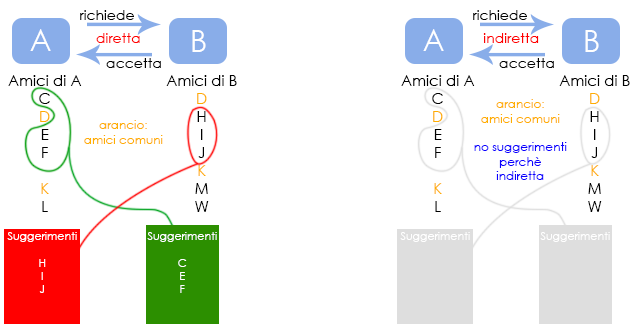
<style>
.page{position:relative;width:642px;height:329px;background:#ffffff}
.page>*{position:absolute;margin:0}
.t1{font:14px "CenturyGothic";color:#000000}
.t2{font:30px "CenturyGothic";color:#ffffff}
.t3{font:14px "CenturyGothic";color:#ff0000}
.t4{font:15px "CenturyGothic";color:#000000}
.t5{font:15px "CenturyGothic";color:#ffae00}
.t6{font:12px "CenturyGothic";color:#0c00ff}
.t7{font:12px "CenturyGothic";color:#ffae00}
.t8{font:11px "CenturyGothic";color:#ffffff}
</style>
<div class="page">
<p class="t1" style="left:80px;top:10px;width:54px;height:10px">richiede</p>
<p class="t1" style="left:473px;top:10px;width:54px;height:10px">richiede</p>
<p class="t2" style="left:30px;top:29px;width:21px;height:22px">A</p>
<p class="t2" style="left:192px;top:30px;width:14px;height:22px">B</p>
<p class="t2" style="left:423px;top:29px;width:21px;height:22px">A</p>
<p class="t2" style="left:585px;top:30px;width:14px;height:22px">B</p>
<p class="t3" style="left:96px;top:33px;width:44px;height:10px">diretta</p>
<p class="t3" style="left:483px;top:33px;width:56px;height:10px">indiretta</p>
<p class="t1" style="left:106px;top:58px;width:55px;height:10px">accetta</p>
<p class="t1" style="left:499px;top:58px;width:55px;height:10px">accetta</p>
<p class="t4" style="left:8px;top:75px;width:74px;height:137px;text-align:center">Amici di A<br>C<br><span class="t5">D<br></span>E<br>F<br><br><span class="t5">K<br></span>L</p>
<p class="t4" style="left:166px;top:75px;width:71px;height:137px;text-align:center">Amici di B<br><span class="t5">D<br></span>H<br>I<br>J<br><span class="t5">K<br></span>M<br>W</p>
<p class="t4" style="left:401px;top:75px;width:74px;height:137px;text-align:center">Amici di A<br>C<br><span class="t5">D<br></span>E<br>F<br><br><span class="t5">K<br></span>L</p>
<p class="t4" style="left:559px;top:75px;width:71px;height:137px;text-align:center">Amici di B<br><span class="t5">D<br></span>H<br>I<br>J<br><span class="t5">K<br></span>M<br>W</p>
<p class="t6" style="left:474px;top:99px;width:93px;height:81px;text-align:center"><span class="t7">arancio:<br>amici comuni<br></span><br>no suggerimenti<br>perchè<br>indiretta</p>
<p class="t7" style="left:84px;top:120px;width:79px;height:24px;text-align:center">arancio:<br>amici comuni</p>
<p class="t8" style="left:7px;top:232px;width:70px;height:61px;text-align:center">Suggerimenti<br><br>H<br>I<br>J</p>
<p class="t8" style="left:147px;top:232px;width:70px;height:61px;text-align:center">Suggerimenti<br><br>C<br>E<br>F</p>
<p class="t8" style="left:400px;top:232px;width:70px;height:10px">Suggerimenti</p>
<p class="t8" style="left:540px;top:232px;width:70px;height:10px">Suggerimenti</p>
</div>
